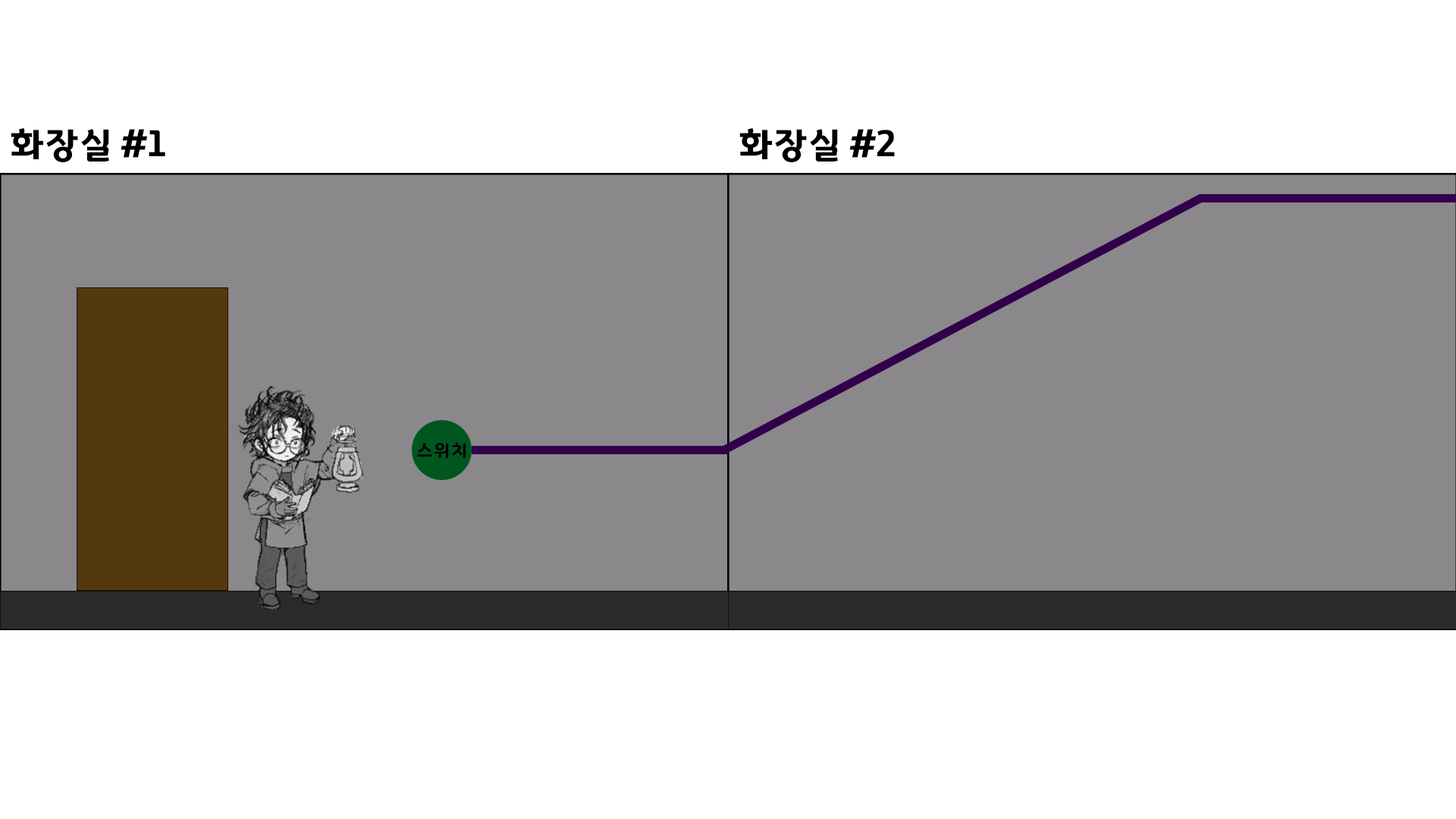
<style>
.page{position:relative;width:1456px;height:819px;background:#ffffff}
.page>*{position:absolute;margin:0}
.t1{font:36.4px "GyeonggiTitleV";letter-spacing:-0.05em;color:#000000}
.t2{font:18.2px "GyeonggiTitleV";letter-spacing:-0.05em;color:#000000}
</style>
<div class="page">
<p class="t1" style="left:11px;top:127px;width:154px;height:35px">화장실 #1</p>
<p class="t1" style="left:739px;top:127px;width:156px;height:35px">화장실 #2</p>
<p class="t2" style="left:417px;top:442px;width:49px;height:16px">스위치</p>
</div>
